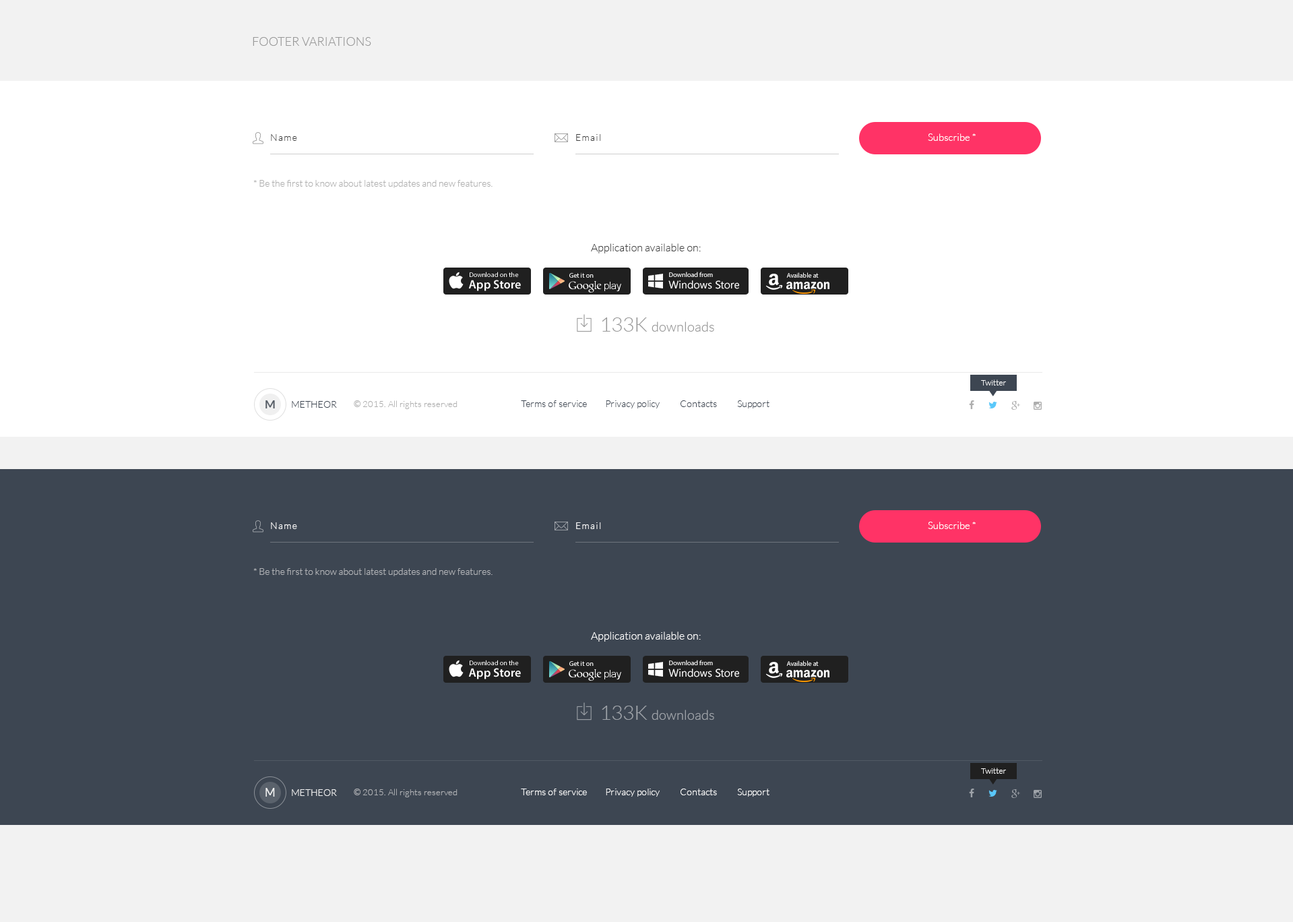
<style>
.page{position:relative;width:1293px;height:922px;background:#ffffff}
.page>*{position:absolute;margin:0}
.t1{font:12.1px "Lato-Light";color:#999999;text-transform:uppercase}
.t2{font:9.4px "Lato-Light";letter-spacing:0.1em;color:#404040}
.t3{font:10.1px "Lato-Light";color:#ffffff}
.t4{font:9.4px "Lato-Light";color:#b0b0b0}
.t5{font:10.8px "Lato-Light";color:#404040}
.t6{font:6.7px/11.5px "MyriadPro-Regular";color:#ffffff}
.t7{font:12.1px/11.5px "MyriadPro-Semibold";color:#ffffff}
.t8{font:6.7px "MyriadPro-Regular";color:#ffffff}
.t9{font:10.8px "SegoeUI";color:#ffffff}
.t10{font:13.5px "Lato-Light";color:#999999}
.t11{font:20.2px "Lato-Light";color:#999999}
.t12{font:8.1px "Lato-Light";color:#ffffff}
.t13{font:11.5px "Lato-Bold";color:#575e67}
.t14{font:9.4px "Lato-Light";color:#3d4652}
.t15{font:8.8px "Lato-Light";color:#aeaeae}
.t16{font:8.8px "Lato-Regular";color:#aeaeae}
.t17{font:9.4px "Lato-Light";letter-spacing:0.1em;color:#ffffff}
.t18{font:9.4px "Lato-Light";color:#b0b2b6}
.t19{font:10.8px "Lato-Light";color:#ffffff}
.t20{font:13.5px "Lato-Light";color:#9ea3a9}
.t21{font:20.2px "Lato-Light";color:#9ea3a9}
.t22{font:11.5px "Lato-Regular";color:#ffffff}
.t23{font:9.4px "Lato-Light";color:#ffffff}
.t24{font:8.8px "Lato-Light";color:#b0b2b6}
.t25{font:8.8px "Lato-Regular";color:#b0b2b6}
</style>
<div class="page">
<p class="t1" style="left:253px;top:37px;width:118px;height:9px">Footer Variations</p>
<p class="t2" style="left:271px;top:134px;width:26px;height:7px">Name</p>
<p class="t2" style="left:576px;top:134px;width:25px;height:7px">Email</p>
<p class="t3" style="left:928px;top:133px;width:48px;height:8px">Subscribe *</p>
<p class="t4" style="left:253px;top:180px;width:240px;height:8px">* Be the first to know about latest updates and new features.</p>
<p class="t5" style="left:591px;top:243px;width:110px;height:10px">Application available on:</p>
<p class="t6" style="left:468px;top:272px;width:53px;height:19px">Download on the<br><span class="t7">App Store</span></p>
<p class="t8" style="left:569px;top:273px;width:25px;height:5px">Get it on</p>
<p class="t9" style="left:669px;top:280px;width:70px;height:9px">Windows Store</p>
<p class="t8" style="left:669px;top:272px;width:44px;height:5px">Download from</p>
<p class="t8" style="left:787px;top:272px;width:32px;height:6px">Available at</p>
<p class="t10" style="left:602px;top:317px;width:112px;height:15px"><span class="t11">133K </span>downloads</p>
<p class="t12" style="left:981px;top:379px;width:25px;height:7px">Twitter</p>
<p class="t13" style="left:266px;top:400px;width:9px;height:8px">M</p>
<p class="t14" style="left:292px;top:401px;width:45px;height:7px">METHEOR</p>
<p class="t15" style="left:354px;top:400px;width:104px;height:9px"><span class="t16">© </span>2015. All rights reserved</p>
<p class="t14" style="left:521px;top:400px;width:249px;height:8px">Terms of service         Privacy policy          Contacts          Support</p>
<p class="t3" style="left:928px;top:522px;width:48px;height:7px">Subscribe *</p>
<p class="t17" style="left:271px;top:522px;width:26px;height:7px">Name</p>
<p class="t17" style="left:576px;top:522px;width:25px;height:7px">Email</p>
<p class="t18" style="left:253px;top:568px;width:240px;height:8px">* Be the first to know about latest updates and new features.</p>
<p class="t19" style="left:591px;top:632px;width:110px;height:10px">Application available on:</p>
<p class="t6" style="left:468px;top:660px;width:53px;height:19px">Download on the<br><span class="t7">App Store</span></p>
<p class="t8" style="left:569px;top:661px;width:25px;height:5px">Get it on</p>
<p class="t8" style="left:669px;top:660px;width:44px;height:5px">Download from</p>
<p class="t8" style="left:787px;top:660px;width:32px;height:6px">Available at</p>
<p class="t9" style="left:669px;top:669px;width:70px;height:8px">Windows Store</p>
<p class="t20" style="left:602px;top:706px;width:112px;height:14px"><span class="t21">133K </span>downloads</p>
<p class="t12" style="left:981px;top:768px;width:25px;height:6px">Twitter</p>
<p class="t22" style="left:266px;top:788px;width:9px;height:9px;opacity:0.9">M</p>
<p class="t23" style="left:292px;top:789px;width:45px;height:7px;opacity:0.9">METHEOR</p>
<p class="t24" style="left:354px;top:789px;width:104px;height:8px"><span class="t25">© </span>2015. All rights reserved</p>
<p class="t23" style="left:521px;top:789px;width:249px;height:8px">Terms of service         Privacy policy          Contacts          Support</p>
</div>
